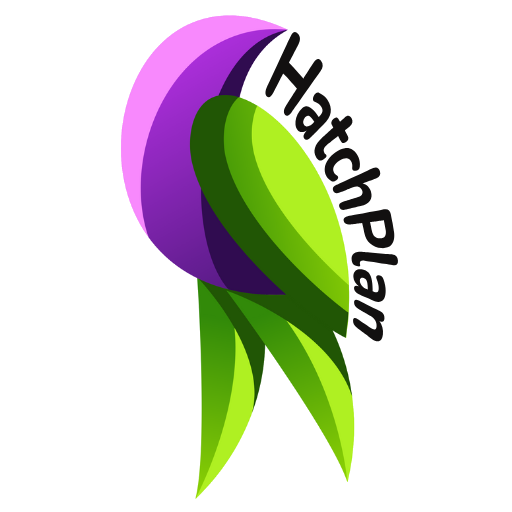
<style>
.page{position:relative;width:512px;height:512px;background:#ffffff}
.page>*{position:absolute;margin:0}
.t1{font:59.6px "Nunito-ExtraBold";color:#121010}
</style>
<div class="page">
<p class="t1" style="left:265px;top:30px;width:134px;height:312px;rotate:72deg">HatchPlan</p>
</div>
